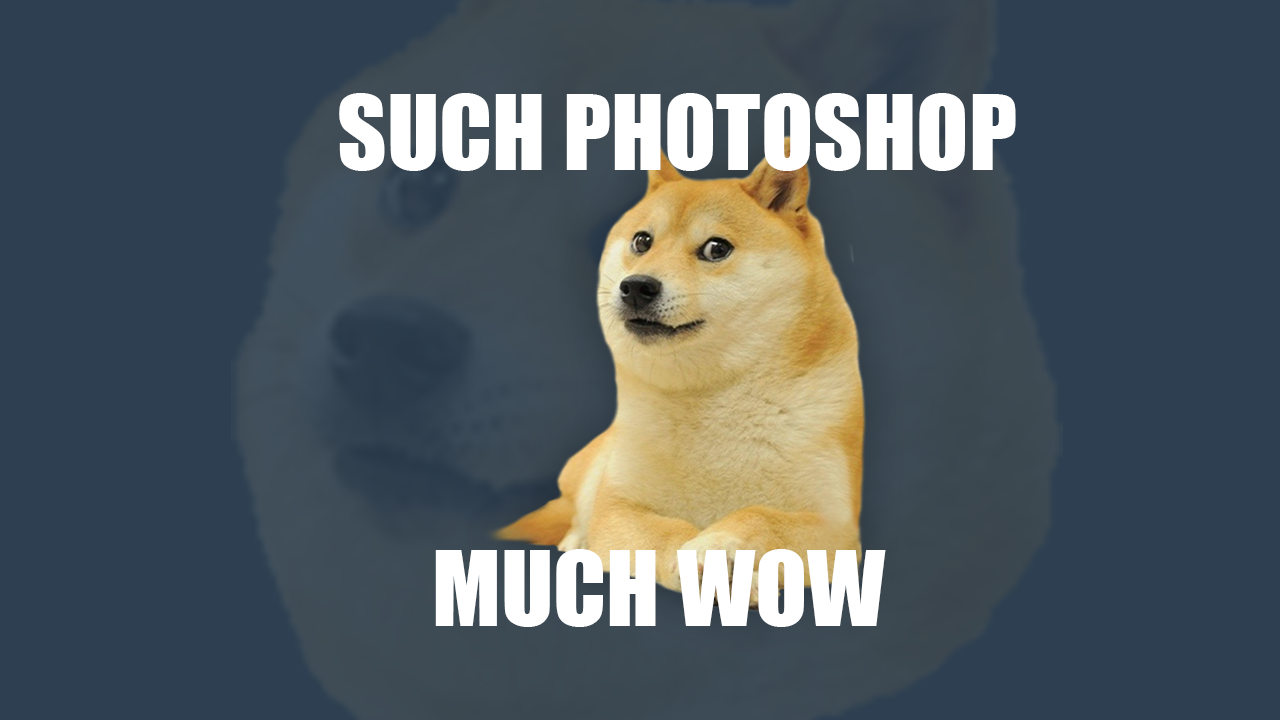
<style>
.page{position:relative;width:1280px;height:720px;background:#2d3f51}
.page>*{position:absolute;margin:0}
.t1{font:96px "Impact";color:#ffffff}
</style>
<div class="page">
<p class="t1" style="left:339px;top:93px;width:677px;height:78px">SUCH PHOTOSHOP</p>
<p class="t1" style="left:435px;top:549px;width:451px;height:78px">MUCH WOW</p>
</div>
